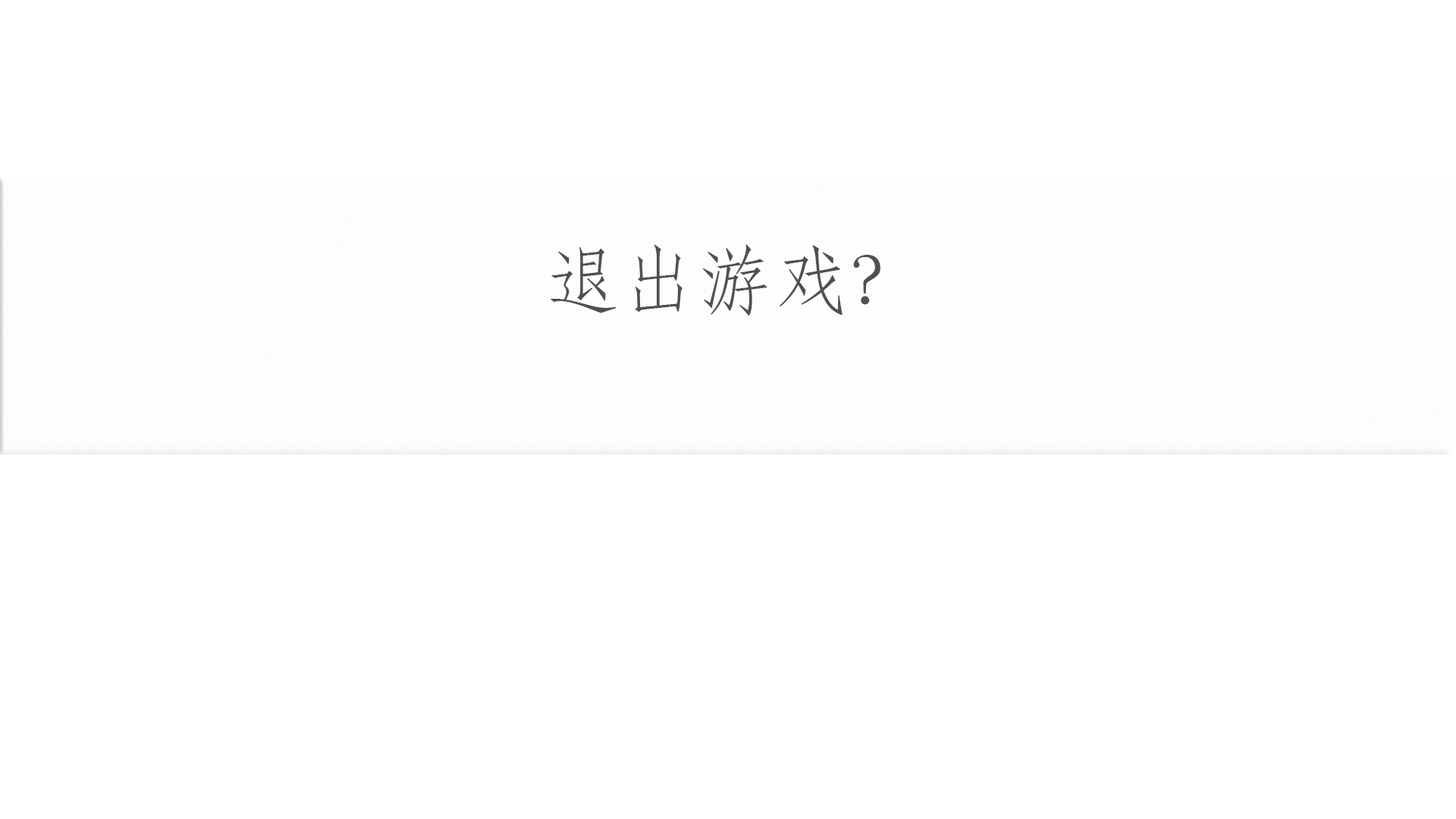
<style>
.page{position:relative;width:1456px;height:819px;background:#ffffff}
.page>*{position:absolute;margin:0}
.t1{font:75.8px "STFangsong";color:#53504c}
</style>
<div class="page">
<p class="t1" style="left:550px;top:244px;width:330px;height:72px">退出游戏？</p>
</div>
